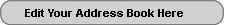
<style>
.page{position:relative;width:225px;height:25px;background:#cfcfcf}
.page>*{position:absolute;margin:0}
.t1{font:11px "Arial-BoldMT";color:#000000}
</style>
<div class="page">
<p class="t1" style="left:25px;top:9px;width:158px;height:8px">Edit Your Address Book Here</p>
</div>
